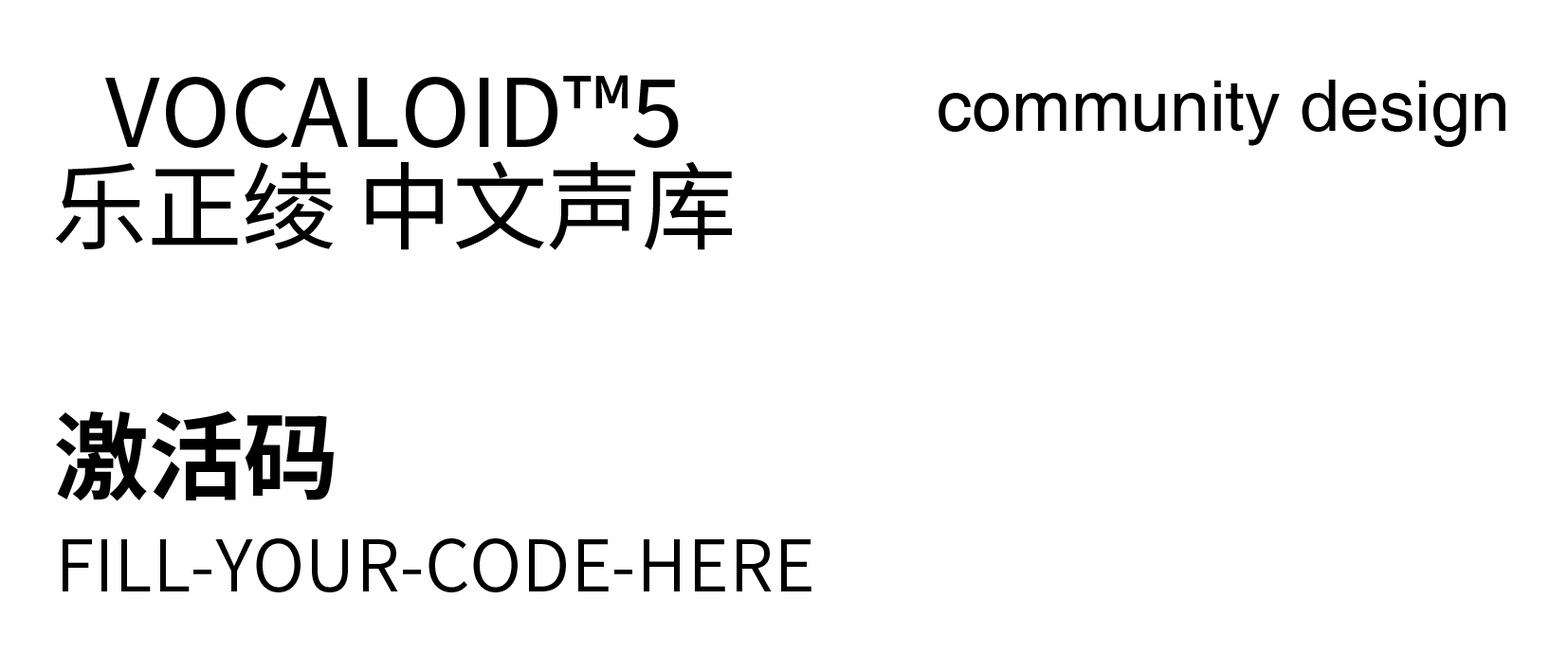
<style>
.page{position:relative;width:1568px;height:672px;background:#ffffff}
.page>*{position:absolute;margin:0}
.t1{font:94.8px/94.8px "SourceHanSansSC-Regular";color:#000000}
.t2{font:71.1px "Helvetica";color:#000000}
.t3{font:94.8px "SourceHanSansSC-Bold";color:#000000}
.t4{font:71.1px "SourceHanSansSC-Normal";color:#000000}
</style>
<div class="page">
<p class="t1" style="left:55px;top:75px;width:677px;height:175px;text-align:center">VOCALOID™5<br>乐正绫 中文声库</p>
<p class="t2" style="left:939px;top:80px;width:566px;height:67px">community design</p>
<p class="t3" style="left:56px;top:410px;width:278px;height:91px">激活码</p>
<p class="t4" style="left:63px;top:538px;width:748px;height:55px">FILL-YOUR-CODE-HERE</p>
</div>
